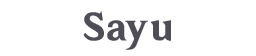
<style>
.page{position:relative;width:256px;height:56px;background:#ffffff}
.page>*{position:absolute;margin:0}
.t1{font:36px "HYWenHei-HEW";color:#4f4e57}
</style>
<div class="page">
<p class="t1" style="left:83px;top:11px;width:88px;height:39px">Sayu</p>
</div>
